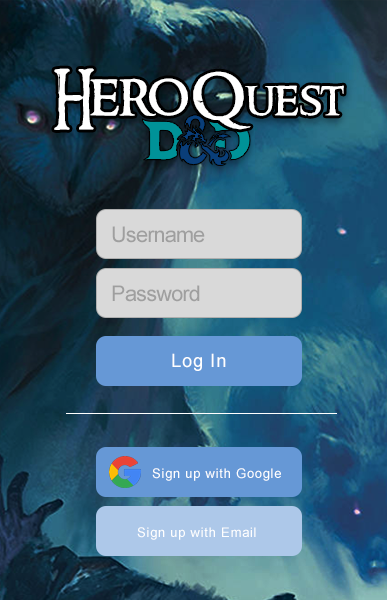
<style>
.page{position:relative;width:387px;height:600px}
.page>*{position:absolute;margin:0}
.t1{font:58.4px "RingbearerMedium";color:#ffffff}
.t2{font:47.8px "RingbearerMedium";color:#ffffff}
.t3{font:21.6px "ArialMT";letter-spacing:-0.03em;color:#9f9f9f}
.t4{font:18.4px "ArialMT";letter-spacing:0.05em;color:#ffffff}
.t5{font:13.2px "ArialMT";letter-spacing:0.05em;color:#ffffff}
</style>
<div class="page">
<p class="t1" style="left:54px;top:68px;width:290px;height:62px">HeroQ<span class="t2">uest</span></p>
<p class="t3" style="left:112px;top:226px;width:93px;height:17px">Username</p>
<p class="t3" style="left:112px;top:285px;width:88px;height:17px">Password</p>
<p class="t4" style="left:172px;top:353px;width:54px;height:18px">Log In</p>
<p class="t5" style="left:152px;top:468px;width:129px;height:13px">Sign up with Google</p>
<p class="t5" style="left:137px;top:527px;width:119px;height:13px">Sign up with Email</p>
</div>
